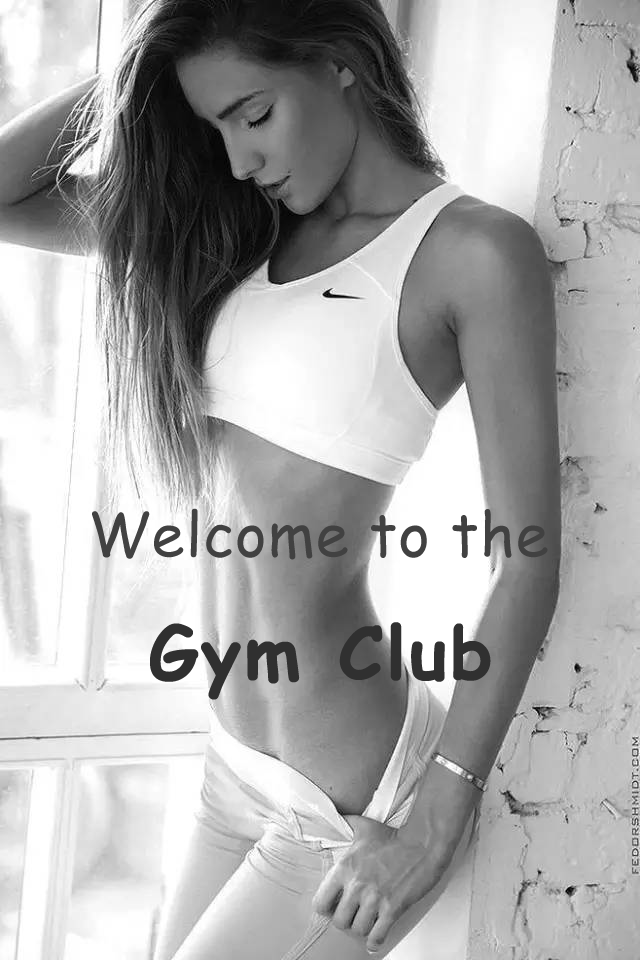
<style>
.page{position:relative;width:640px;height:960px}
.page>*{position:absolute;margin:0}
.t1{font:60px "ComicSansMS";letter-spacing:0.02em;color:#414141}
.t2{font:72px "ComicSansMS-Bold";letter-spacing:0.02em;color:#303030;font-weight:bold}
</style>
<div class="page">
<p class="t1" style="left:92px;top:508px;width:456px;height:52px">Welcome to the</p>
<p class="t2" style="left:150px;top:622px;width:341px;height:78px">Gym Club</p>
</div>
